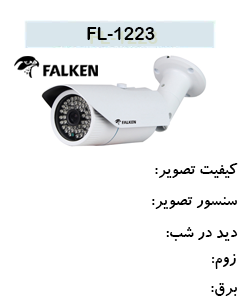
<style>
.page{position:relative;width:240px;height:300px;background:#ffffff}
.page>*{position:absolute;margin:0}
.t1{font:17.6px "ArialRoundedMTBold";color:#000000}
.t2{font:17.6px "BKoodakBold";color:#000000}
</style>
<div class="page">
<p class="t1" style="left:87px;top:27px;width:68px;height:13px">1223-FL</p>
<p class="t2" style="left:155px;top:163px;width:83px;height:15px">کیفیت تصویر:</p>
<p class="t2" style="left:152px;top:197px;width:85px;height:12px">سنسور تصویر:</p>
<p class="t2" style="left:166px;top:227px;width:72px;height:14px">دید در شب:</p>
<p class="t2" style="left:212px;top:254px;width:24px;height:15px">زوم:</p>
<p class="t2" style="left:211px;top:283px;width:26px;height:13px">برق:</p>
</div>
